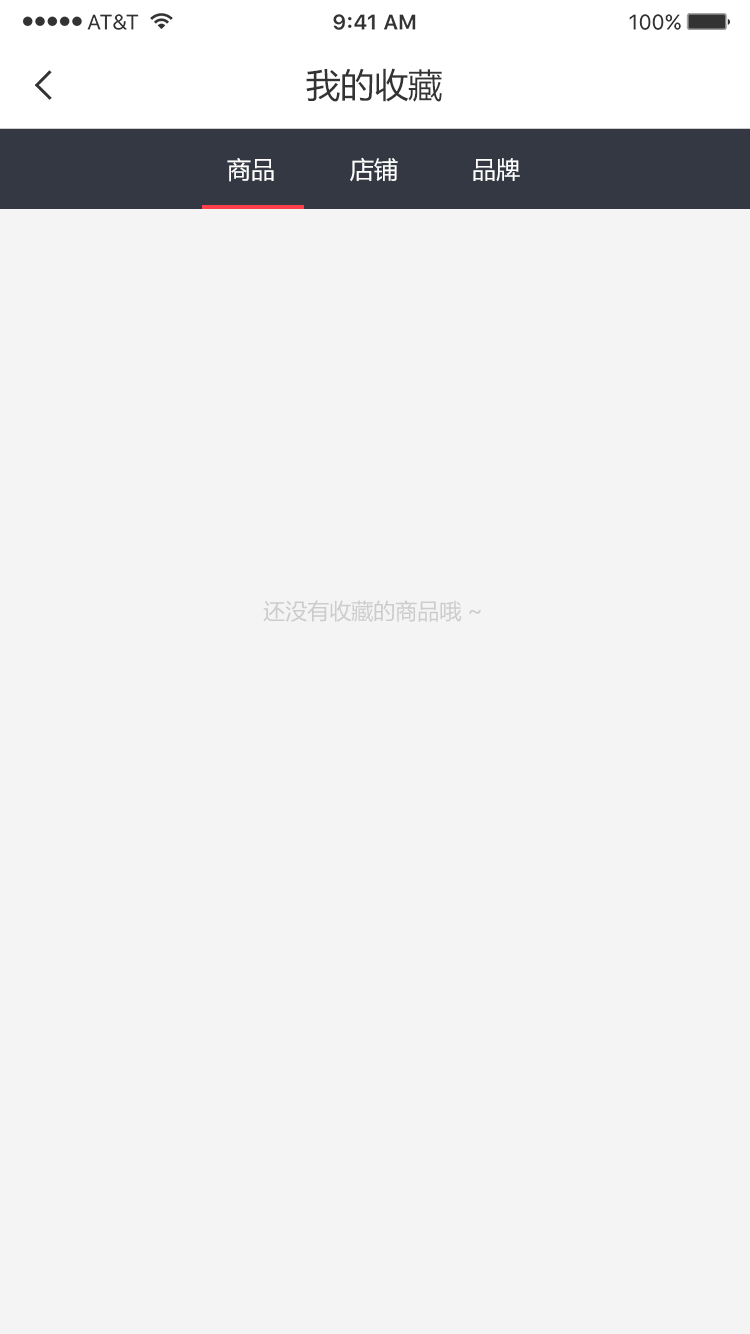
<style>
.page{position:relative;width:750px;height:1334px;background:#f4f4f4}
.page>*{position:absolute;margin:0}
.t1{font:34px "MicrosoftYaHei";color:#333333}
.t2{font:24px "MicrosoftYaHei";color:#ffffff}
.t3{font:22px "MicrosoftYaHei";color:#cccccc}
</style>
<div class="page">
<p class="t1" style="left:306px;top:68px;width:136px;height:34px">我的收藏</p>
<p class="t2" style="left:227px;top:158px;width:47px;height:24px">商品</p>
<p class="t2" style="left:350px;top:157px;width:48px;height:25px">店铺</p>
<p class="t2" style="left:473px;top:158px;width:47px;height:24px">品牌</p>
<p class="t3" style="left:263px;top:600px;width:218px;height:22px">还没有收藏的商品哦~</p>
</div>
